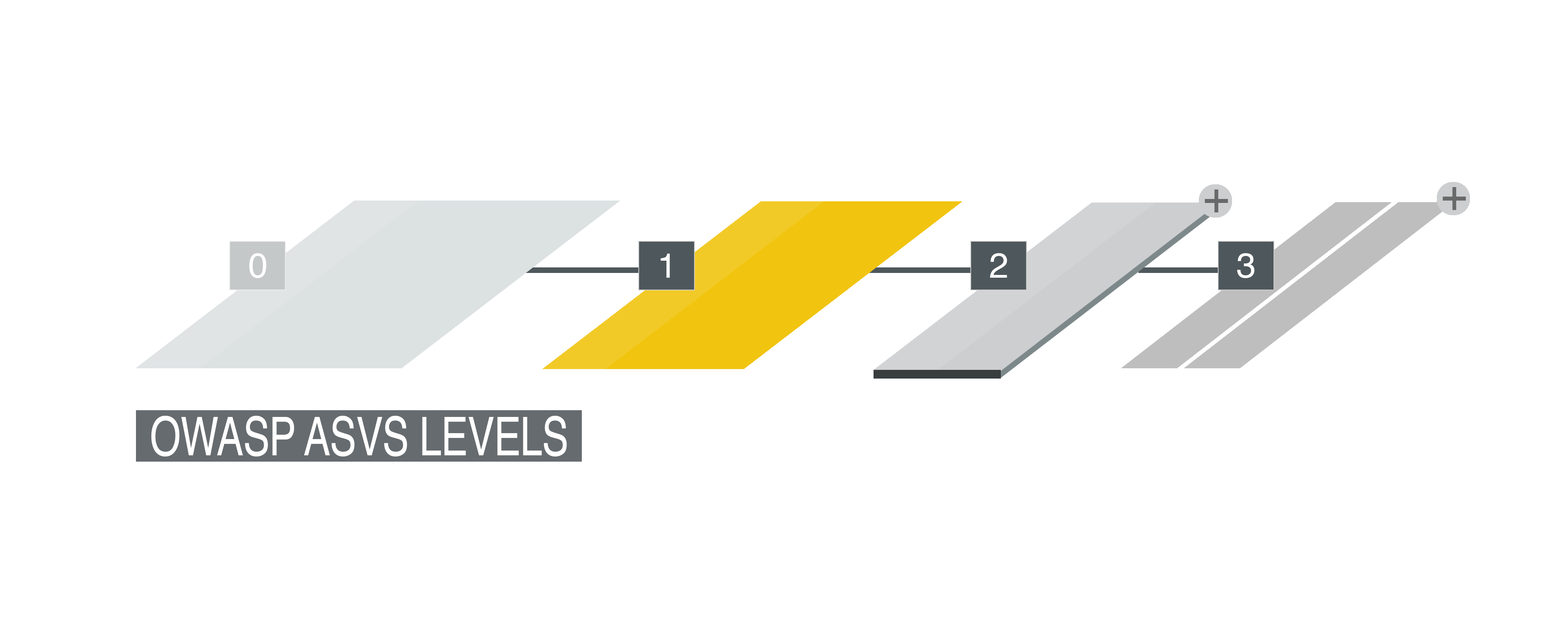
<style>
.page{position:relative;width:1568px;height:625px;background:#ffffff}
.page>*{position:absolute;margin:0}
.t1{font:45.4px "Helvetica";letter-spacing:-0.01em;color:#696969}
.t2{font:35px "Helvetica";letter-spacing:-0.01em;color:#ffffff}
.t3{font:35.1px "Helvetica";letter-spacing:-0.01em;color:#ffffff}
.t4{font:53.3px "Helvetica";letter-spacing:-0.01em;color:#ffffff;scale:0.75 1}
</style>
<div class="page">
<p class="t1" style="left:1205px;top:189px;width:23px;height:23px">+</p>
<p class="t1" style="left:1443px;top:187px;width:23px;height:23px">+</p>
<p class="t2" style="left:249px;top:253px;width:17px;height:25px">0</p>
<p class="t3" style="left:990px;top:253px;width:17px;height:24px">2</p>
<p class="t3" style="left:1237px;top:253px;width:18px;height:25px">3</p>
<p class="t4" style="left:151px;top:415px;width:416px;height:41px">OWASP ASVS LEVELS</p>
</div>
